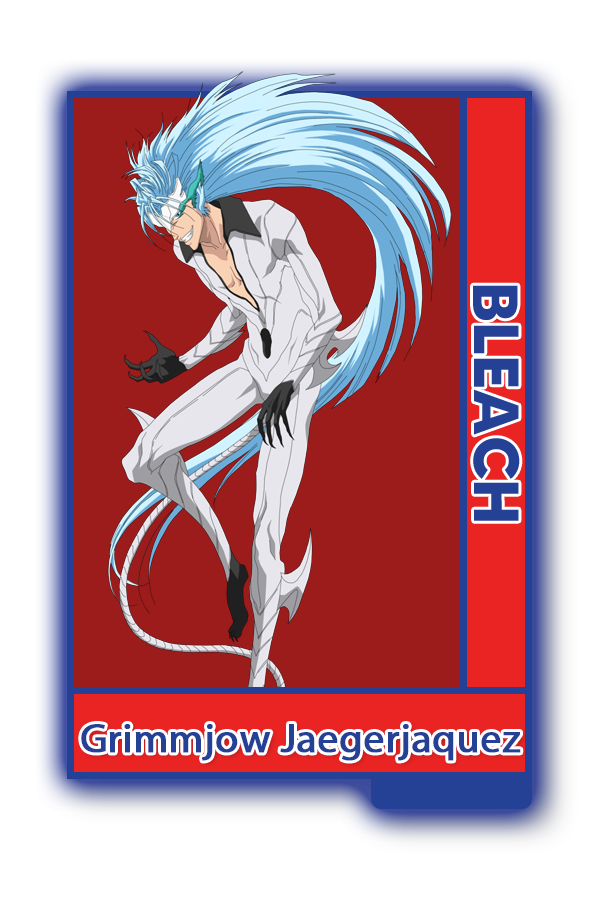
<style>
.page{position:relative;width:600px;height:900px;background:#9c1c1b}
.page>*{position:absolute;margin:0}
.t1{font:63.6px "MADETOMMY-Bold";color:#254195}
.t2{font:41.2px "MyriadPro-Regular";color:#254195;font-weight:bold}
</style>
<div class="page">
<p class="t1" style="left:473px;top:285px;width:47px;height:236px;rotate:90deg">BLEACH</p>
<p class="t2" style="left:81px;top:724px;width:440px;height:37px">Grimmjow Jaegerjaquez</p>
</div>
